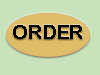
<style>
.page{position:relative;width:100px;height:75px;background:#c8e3bc}
.page>*{position:absolute;margin:0}
.t1{font:19.5px "ArialRoundedMTBold";color:#030303}
</style>
<div class="page">
<p class="t1" style="left:13px;top:25px;width:69px;height:14px">ORDER</p>
</div>
